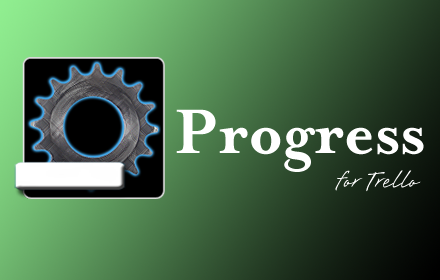
<style>
.page{position:relative;width:440px;height:280px}
.page>*{position:absolute;margin:0}
.t1{font:72px "MrsEavesSmartLigBold";color:#ffffff}
.t2{font:30px "Brisa";color:#ffffff}
</style>
<div class="page">
<p class="t1" style="left:176px;top:109px;width:248px;height:63px">Progress</p>
<p class="t2" style="left:335px;top:170px;width:86px;height:22px">for Trello</p>
</div>
